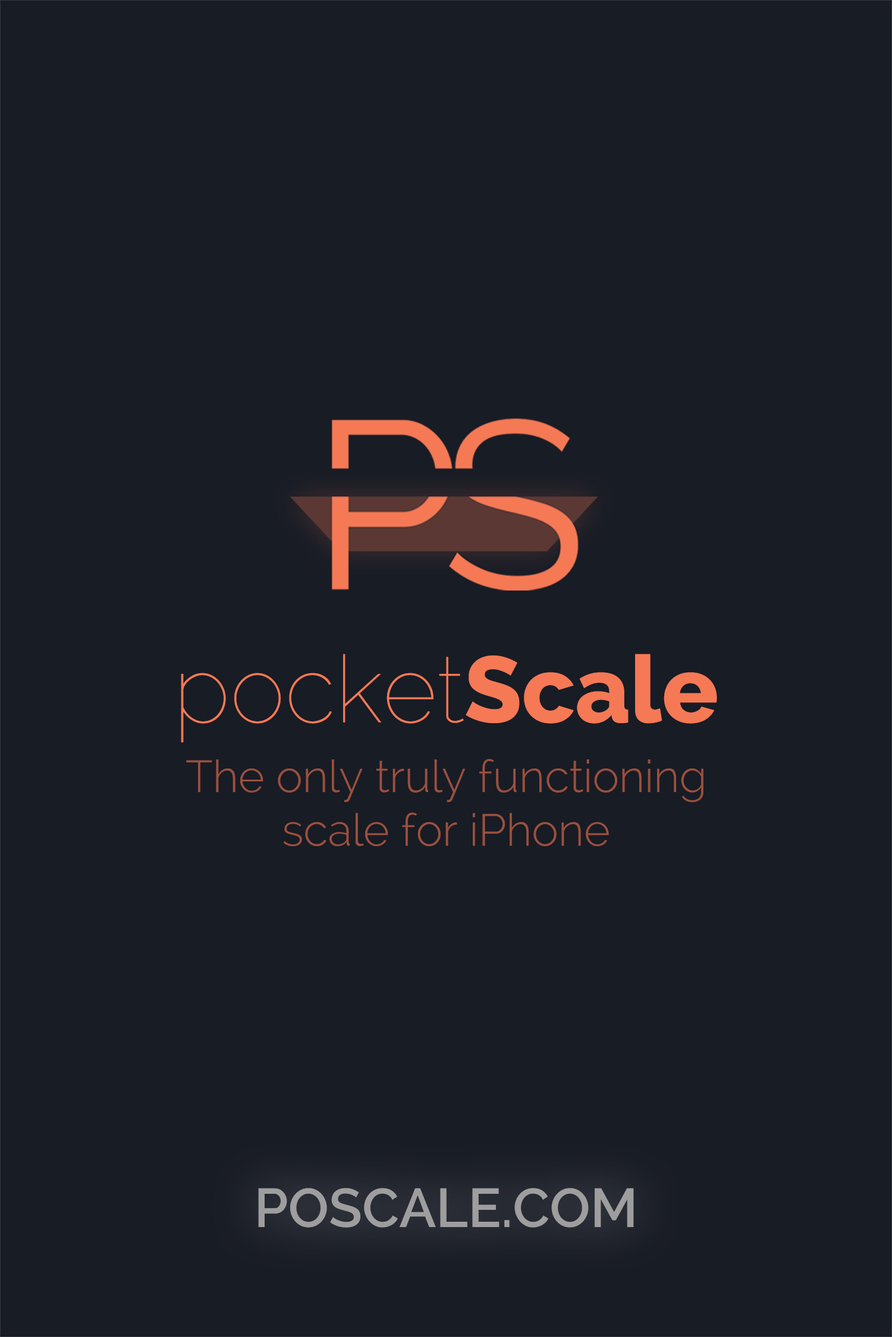
<style>
.page{position:relative;width:892px;height:1337px;background:#181c25}
.page>*{position:absolute;margin:0}
.t1{font:93.4px "Raleway-Thin";color:#f67955}
.t2{font:93.4px "Raleway-ExtraBold";color:#f67955}
.t3{font:44.7px "Raleway-Light";color:#9b503e}
.t4{font:54.5px "Raleway-SemiBold";color:#9e9e9f}
</style>
<div class="page">
<p class="t1" style="left:181px;top:654px;width:536px;height:89px">pocket<span class="t2">Scale</span></p>
<p class="t3" style="left:186px;top:759px;width:517px;height:87px;text-align:center">The only truly functioning <br>scale for iPhone</p>
<p class="t4" style="left:258px;top:1188px;width:376px;height:40px">POSCALE.COM</p>
</div>
